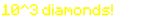
<style>
.page{position:relative;width:168px;height:20px;background:#ffffff}
.page>*{position:absolute;margin:0}
.t1{font:12.5px "Minecraftia-Regular";color:#fffb00}
</style>
<div class="page">
<p class="t1" style="left:1px;top:4px;width:112px;height:12px">10^3 diamonds!</p>
</div>
